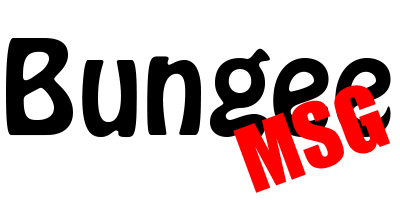
<style>
.page{position:relative;width:400px;height:200px;background:#ffffff}
.page>*{position:absolute;margin:0}
.t1{font:116.7px "HoboStd";color:#000000}
.t2{font:83.3px "Impact";color:#ff0000}
</style>
<div class="page">
<p class="t1" style="left:6px;top:38px;width:385px;height:100px">Bungee</p>
<p class="t2" style="left:233px;top:85px;width:157px;height:108px;rotate:-20deg">MSG</p>
</div>
